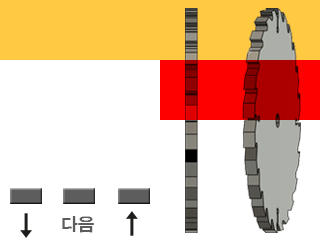
<style>
.page{position:relative;width:320px;height:240px;background:#ffffff}
.page>*{position:absolute;margin:0}
.t1{font:16.7px "H2gtrE";color:#5d5d5d}
</style>
<div class="page">
<p class="t1" style="left:62px;top:216px;width:32px;height:17px">다음</p>
</div>
